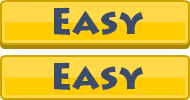
<style>
.page{position:relative;width:190px;height:100px;background:#ffd948}
.page>*{position:absolute;margin:0}
.t1{font:36px "LithosPro-Black";color:#3d4c6b}
</style>
<div class="page">
<p class="t1" style="left:54px;top:7px;width:89px;height:28px">Easy</p>
<p class="t1" style="left:54px;top:62px;width:89px;height:28px">Easy</p>
</div>
